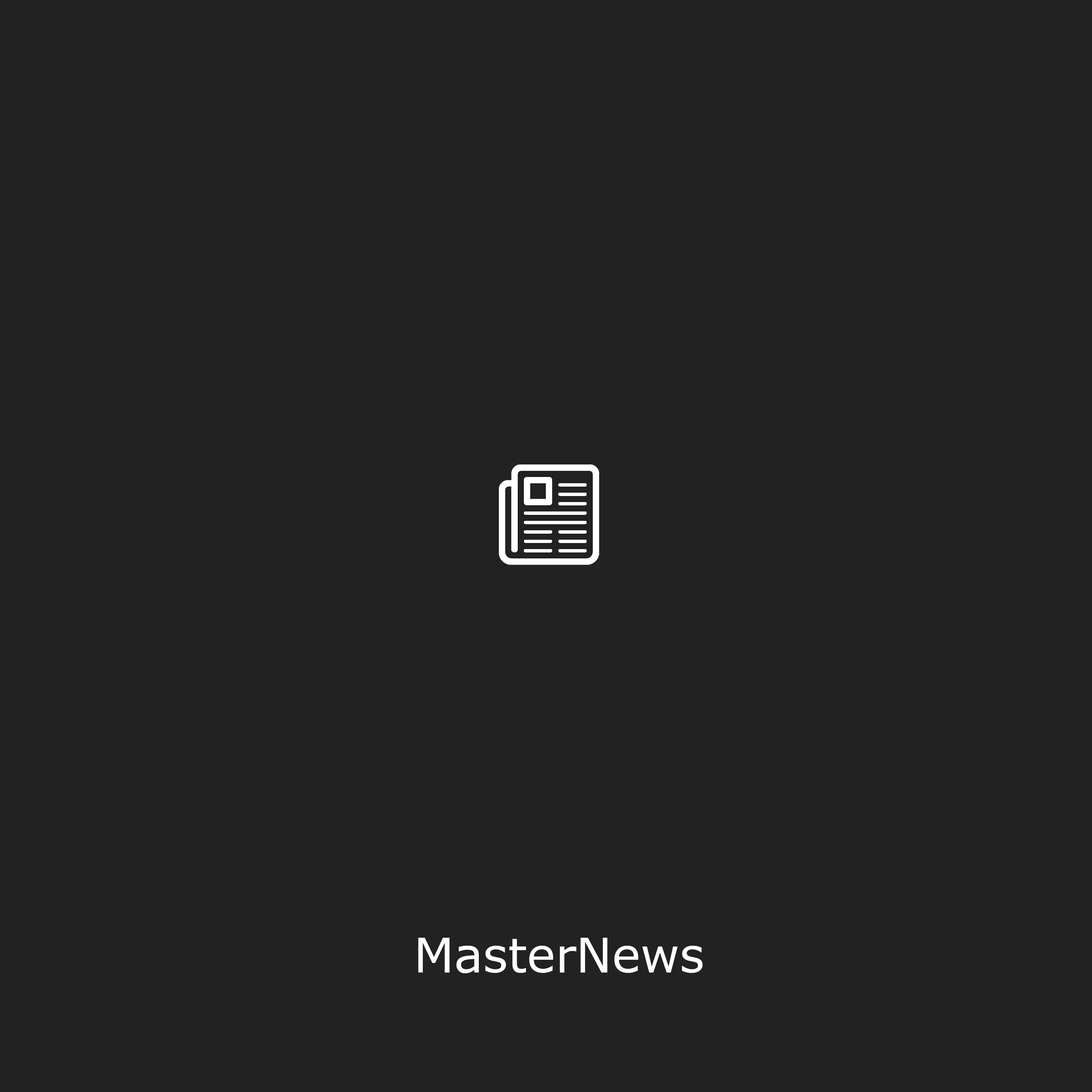
<style>
.page{position:relative;width:1092px;height:1092px;background:#222222}
.page>*{position:absolute;margin:0}
.t1{font:48px "Verdana";color:#ffffff}
</style>
<div class="page">
<p class="t1" style="left:418px;top:938px;width:285px;height:35px">MasterNews</p>
</div>
